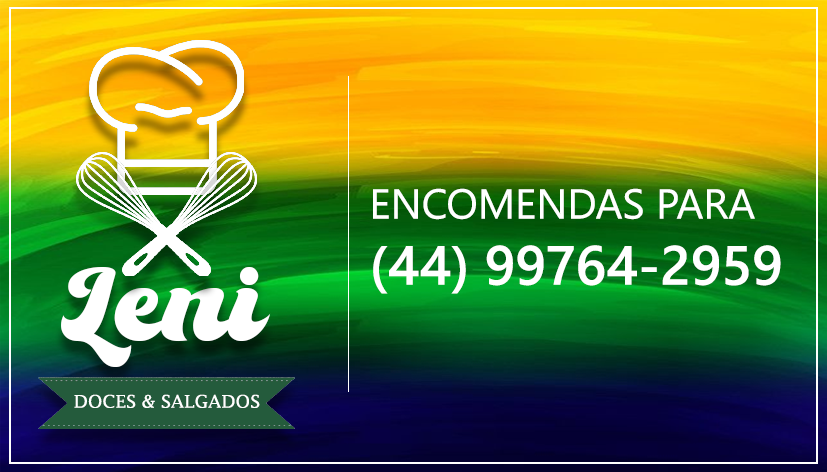
<style>
.page{position:relative;width:827px;height:472px}
.page>*{position:absolute;margin:0}
.t1{font:41.7px "SegoeUI";color:#ffffff}
.t2{font:55.1px "SegoeUI-Semibold";color:#ffffff}
.t3{font:121.9px "TheKanderlic-Regular";color:#ffffff}
.t4{font:17.4px "LucidaFax";color:#ffffff;scale:1.05 1}
</style>
<div class="page">
<p class="t1" style="left:373px;top:188px;width:408px;height:106px">ENCOMENDAS PARA<br><span class="t2">(44) 99764-2959</span></p>
<p class="t3" style="left:61px;top:267px;width:210px;height:100px">Leni</p>
<p class="t4" style="left:74px;top:394px;width:186px;height:14px">DOCES &amp; SALGADOS</p>
</div>
